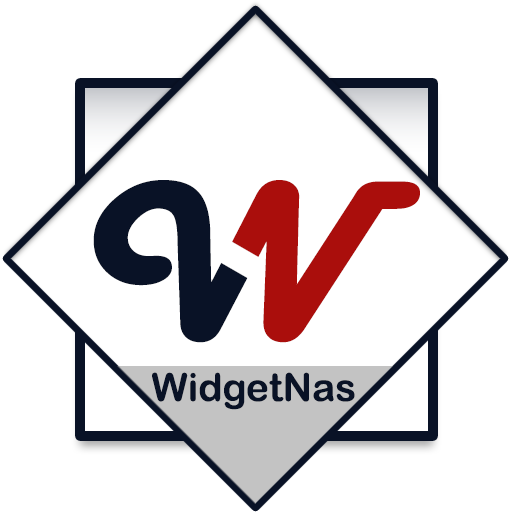
<style>
.page{position:relative;width:512px;height:512px;background:#ffffff}
.page>*{position:absolute;margin:0}
.t1{font:232.1px "HarlowSolid";scale:1.12 1}
.t2{font:38.8px "ArialRoundedMTBold";color:#091226}
</style>
<div class="page">
<p class="t1" style="left:93px;top:180px;width:327px;height:163px">W</p>
<p class="t1" style="left:93px;top:180px;width:327px;height:163px">W</p>
<p class="t2" style="left:152px;top:372px;width:203px;height:38px">WidgetNas</p>
</div>
